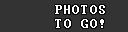
<style>
.page{position:relative;width:128px;height:32px;background:#333333}
.page>*{position:absolute;margin:0}
.t1{font:14px/14px "Terminal";letter-spacing:0.1em;color:#ffffff}
</style>
<div class="page">
<p class="t1" style="left:55px;top:5px;width:50px;height:23px;text-align:center">PHOTOS<br>TO GO!</p>
</div>
